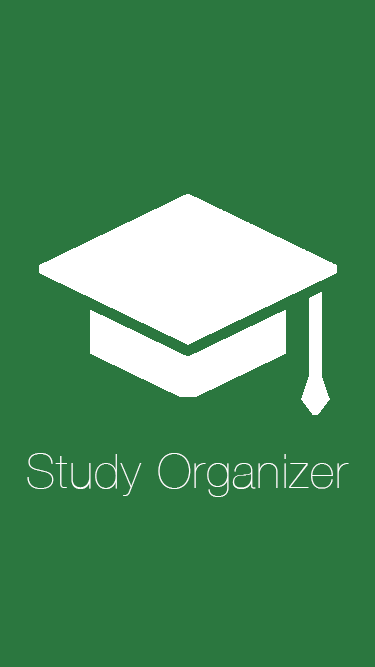
<style>
.page{position:relative;width:375px;height:667px;background:#2b773f}
.page>*{position:absolute;margin:0}
.t1{font:48px "HelveticaNeue-UltraLight";letter-spacing:0.025em;color:#ffffff}
</style>
<div class="page">
<p class="t1" style="left:27px;top:453px;width:322px;height:44px">Study Organizer</p>
</div>
